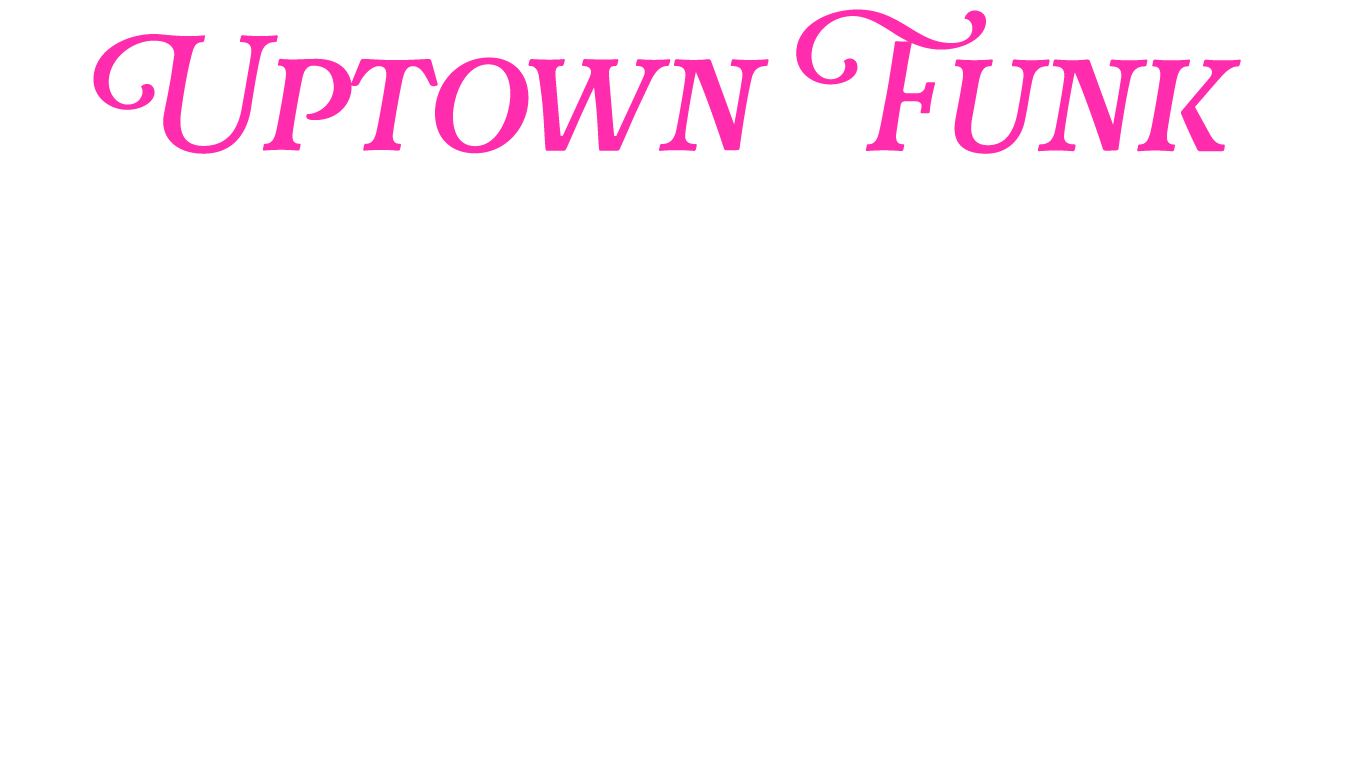
<style>
.page{position:relative;width:1366px;height:768px;background:#ffffff}
.page>*{position:absolute;margin:0}
.t1{font:150px "Rafaella-Regular";color:#ff2cad}
</style>
<div class="page">
<p class="t1" style="left:93px;top:9px;width:1148px;height:145px">Uptown Funk</p>
</div>
